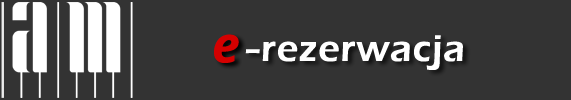
<style>
.page{position:relative;width:571px;height:100px;background:#333333}
.page>*{position:absolute;margin:0}
.t1{font:50px "OpenSans-BoldItalic";letter-spacing:0.025em;color:#d40000}
.t2{font:38px "ErasITC-Demi";letter-spacing:0.025em;color:#ffffff}
.t3{font:38px "ErasITC-Demi";letter-spacing:0.025em;color:#ffffff;scale:1.4 1}
</style>
<div class="page">
<p class="t1" style="left:214px;top:34px;width:25px;height:29px">e</p>
<p class="t2" style="left:245px;top:35px;width:218px;height:35px"><span class="t3">-</span>rezerwacja</p>
</div>
